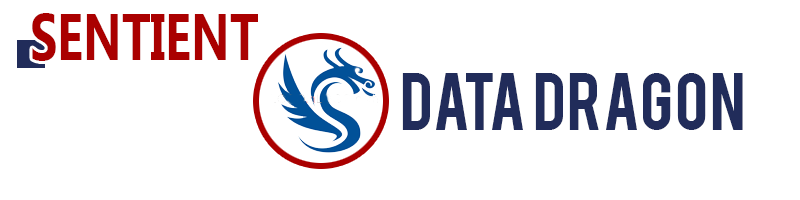
<style>
.page{position:relative;width:800px;height:200px;background:#ffffff}
.page>*{position:absolute;margin:0}
.t1{font:66.1px "MicrosoftNewTaiLue-Bold";color:#aa0000;scale:0.74 1}
.t2{font:64.3px "Bebas";color:#212c5a}
</style>
<div class="page">
<p class="t1" style="left:32px;top:13px;width:226px;height:48px">SENTIENT</p>
<p class="t2" style="left:402px;top:73px;width:341px;height:57px">DATA DRAGON</p>
</div>
